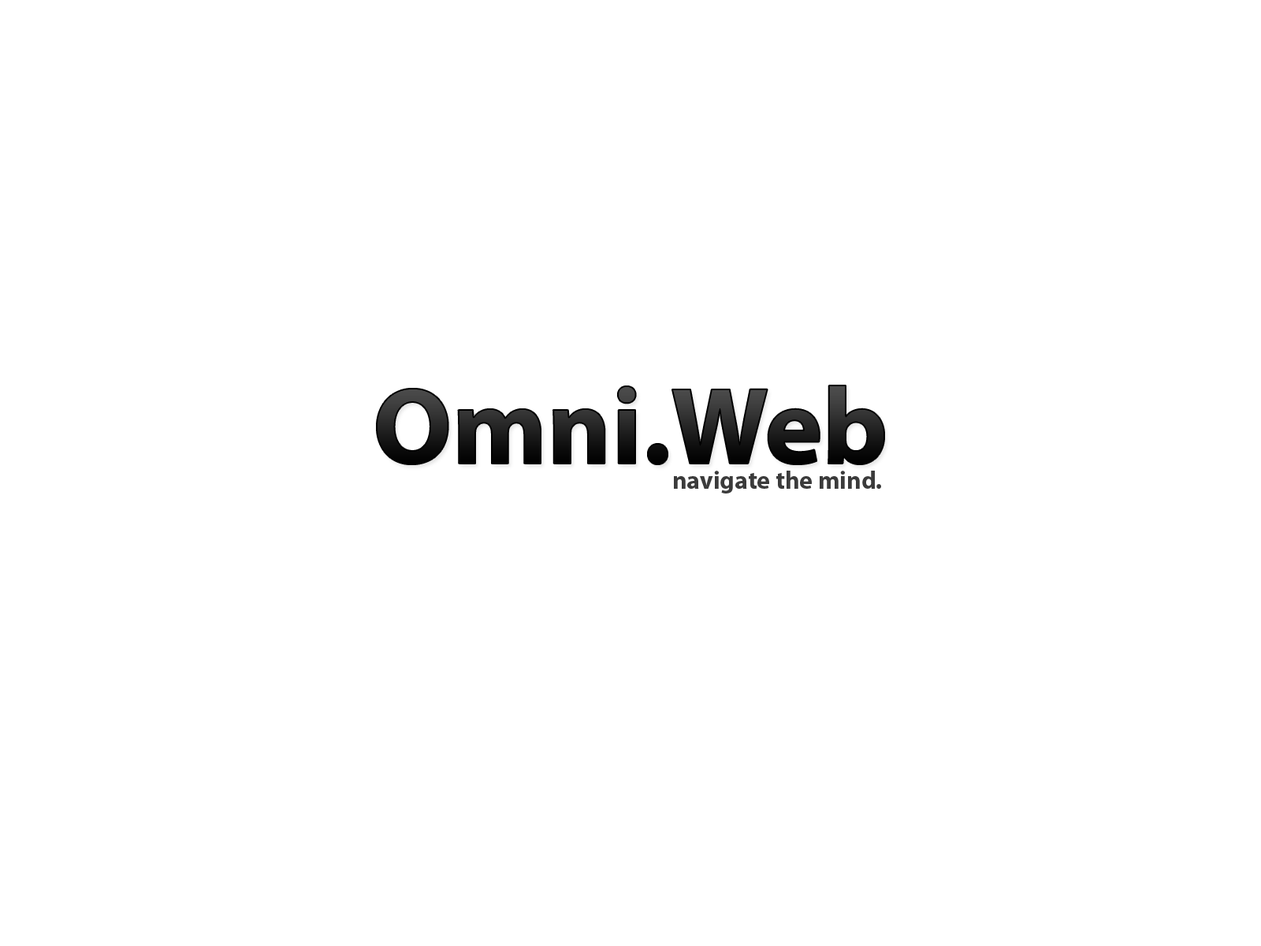
<style>
.page{position:relative;width:1261px;height:946px;background:#ffffff}
.page>*{position:absolute;margin:0}
.t1{font:110.3px "MyriadPro-Bold"}
.t2{font:25.2px "MyriadPro-Bold";color:#3b3b3b}
</style>
<div class="page">
<p class="t1" style="left:377px;top:385px;width:507px;height:79px">Omni.Web</p>
<p class="t2" style="left:674px;top:470px;width:207px;height:23px">navigate the mind.</p>
</div>
